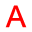
<style>
.page{position:relative;width:32px;height:32px;background:#ffffff}
.page>*{position:absolute;margin:0}
.t1{font:30px "ArialMT";letter-spacing:0.015em;color:#ff0000}
</style>
<div class="page">
<p class="t1" style="left:5px;top:5px;width:22px;height:23px">A</p>
</div>
